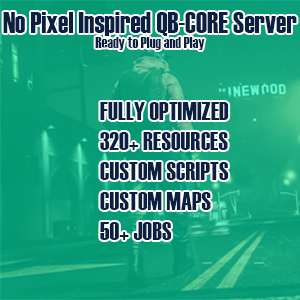
<style>
.page{position:relative;width:300px;height:300px}
.page>*{position:absolute;margin:0}
.t1{font:28.7px "Haettenschweiler";letter-spacing:0.005em;color:#0a1f42}
.t2{font:15.6px "Haettenschweiler";letter-spacing:0.005em;color:#0a1f42}
.t3{font:25px "Haettenschweiler";letter-spacing:0.005em;color:#0a1f42}
</style>
<div class="page">
<p class="t1" style="left:3px;top:12px;width:294px;height:24px">No Pixel Inspired QB-CORE Server</p>
<p class="t2" style="left:95px;top:37px;width:110px;height:13px">Ready to Plug and Play</p>
<p class="t3" style="left:100px;top:102px;width:129px;height:138px">FULLY OPTIMIZED<br>320+ RESOURCES<br>CUSTOM SCRIPTS<br>CUSTOM MAPS<br>50+ JOBS</p>
</div>
